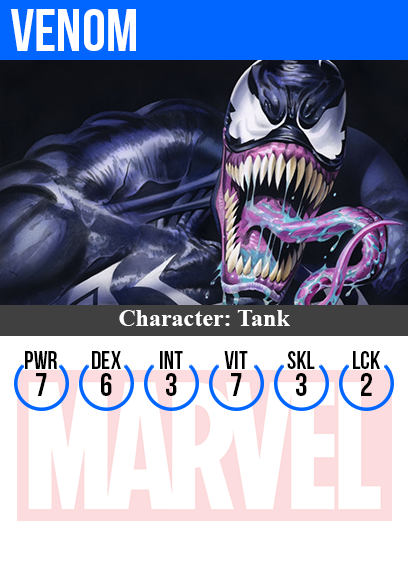
<style>
.page{position:relative;width:408px;height:585px;background:#ffffff}
.page>*{position:absolute;margin:0}
.t1{font:60px "BebasNeue";color:#ffffff}
.t2{font:24px "TimesNewRomanPS-BoldMT";color:#ffffff}
.t3{font:25px "BebasNeue";color:#000000}
.t4{font:32px "BebasNeue";color:#000000}
</style>
<div class="page">
<p class="t1" style="left:11px;top:9px;width:125px;height:42px">venom</p>
<p class="t2" style="left:119px;top:310px;width:171px;height:16px">Character: Tank</p>
<p class="t3" style="left:25px;top:351px;width:32px;height:18px">PWR</p>
<p class="t3" style="left:92px;top:351px;width:29px;height:18px">dex</p>
<p class="t3" style="left:160px;top:351px;width:23px;height:18px">int</p>
<p class="t3" style="left:224px;top:351px;width:24px;height:18px">vit</p>
<p class="t3" style="left:287px;top:351px;width:28px;height:18px">skl</p>
<p class="t3" style="left:353px;top:351px;width:27px;height:18px">lck</p>
<p class="t4" style="left:36px;top:373px;width:11px;height:23px">7</p>
<p class="t4" style="left:101px;top:373px;width:11px;height:23px">6</p>
<p class="t4" style="left:166px;top:373px;width:11px;height:23px">3</p>
<p class="t4" style="left:231px;top:373px;width:11px;height:23px">7</p>
<p class="t4" style="left:296px;top:373px;width:11px;height:23px">3</p>
<p class="t4" style="left:361px;top:373px;width:11px;height:23px">2</p>
</div>
